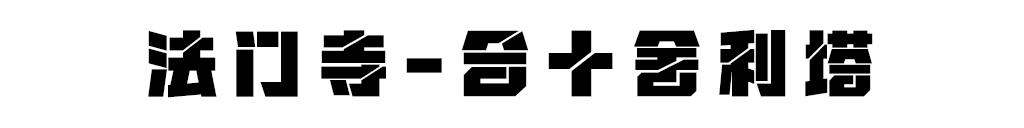
<style>
.page{position:relative;width:1024px;height:128px;background:#ffffff}
.page>*{position:absolute;margin:0}
.t1{font:71.8px "AaJiJiaHei";letter-spacing:0.2em;color:#000000}
</style>
<div class="page">
<p class="t1" style="left:148px;top:29px;width:725px;height:69px">法门寺-合十舍利塔</p>
</div>
